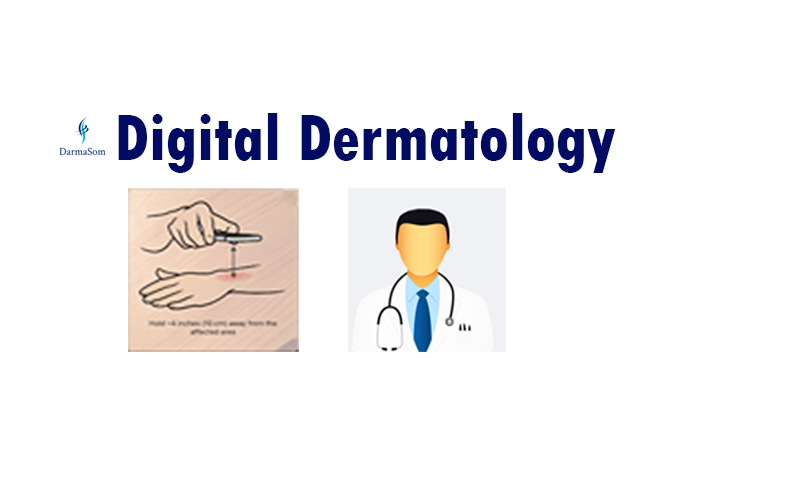
<style>
.page{position:relative;width:800px;height:500px;background:#ffffff}
.page>*{position:absolute;margin:0}
.t1{font:69.4px "TwCenMT-CondensedExtraBold";color:#010b64;scale:0.95 1}
</style>
<div class="page">
<p class="t1" style="left:118px;top:113px;width:498px;height:60px">Digital Dermatology</p>
</div>
